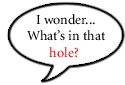
<style>
.page{position:relative;width:125px;height:85px;background:#ffffff}
.page>*{position:absolute;margin:0}
.t1{font:14px "Minion-Regular";color:#000000}
.t2{font:12px "Minion-Regular";color:#000000}
.t3{font:14px "Minion-Regular";color:#ff0000}
</style>
<div class="page">
<p class="t1" style="left:27px;top:14px;width:79px;height:44px"><span class="t2">         </span>I wonder...<br>     What’s in that<br>            <span class="t3">hole?</span></p>
</div>
